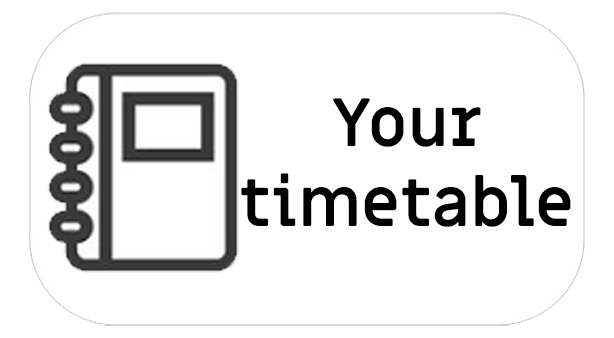
<style>
.page{position:relative;width:614px;height:338px;background:#ffffff}
.page>*{position:absolute;margin:0}
.t1{font:66.6px "MiriamLibre-Bold";color:#000000}
</style>
<div class="page">
<p class="t1" style="left:241px;top:98px;width:330px;height:129px;text-align:center">Your<br>timetable</p>
</div>
